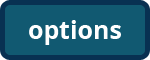
<style>
.page{position:relative;width:150px;height:60px;background:#115971}
.page>*{position:absolute;margin:0}
.t1{font:25px "OpenSans-Bold";color:#ffffff}
</style>
<div class="page">
<p class="t1" style="left:29px;top:20px;width:92px;height:25px">options</p>
</div>
